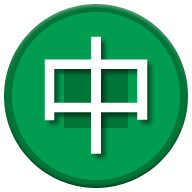
<style>
.page{position:relative;width:192px;height:192px;background:#ffffff}
.page>*{position:absolute;margin:0}
.t1{font:128px "NotoSansCJKtc-Regular";color:#ffffff}
</style>
<div class="page">
<p class="t1" style="left:44px;top:36px;width:104px;height:118px">中</p>
</div>
